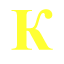
<style>
.page{position:relative;width:64px;height:64px;background:#ffffff}
.page>*{position:absolute;margin:0}
.t1{font:60px "TimesNewRomanPS-BoldMT";color:#ffff33}
</style>
<div class="page">
<p class="t1" style="left:11px;top:9px;width:42px;height:41px">К</p>
</div>
